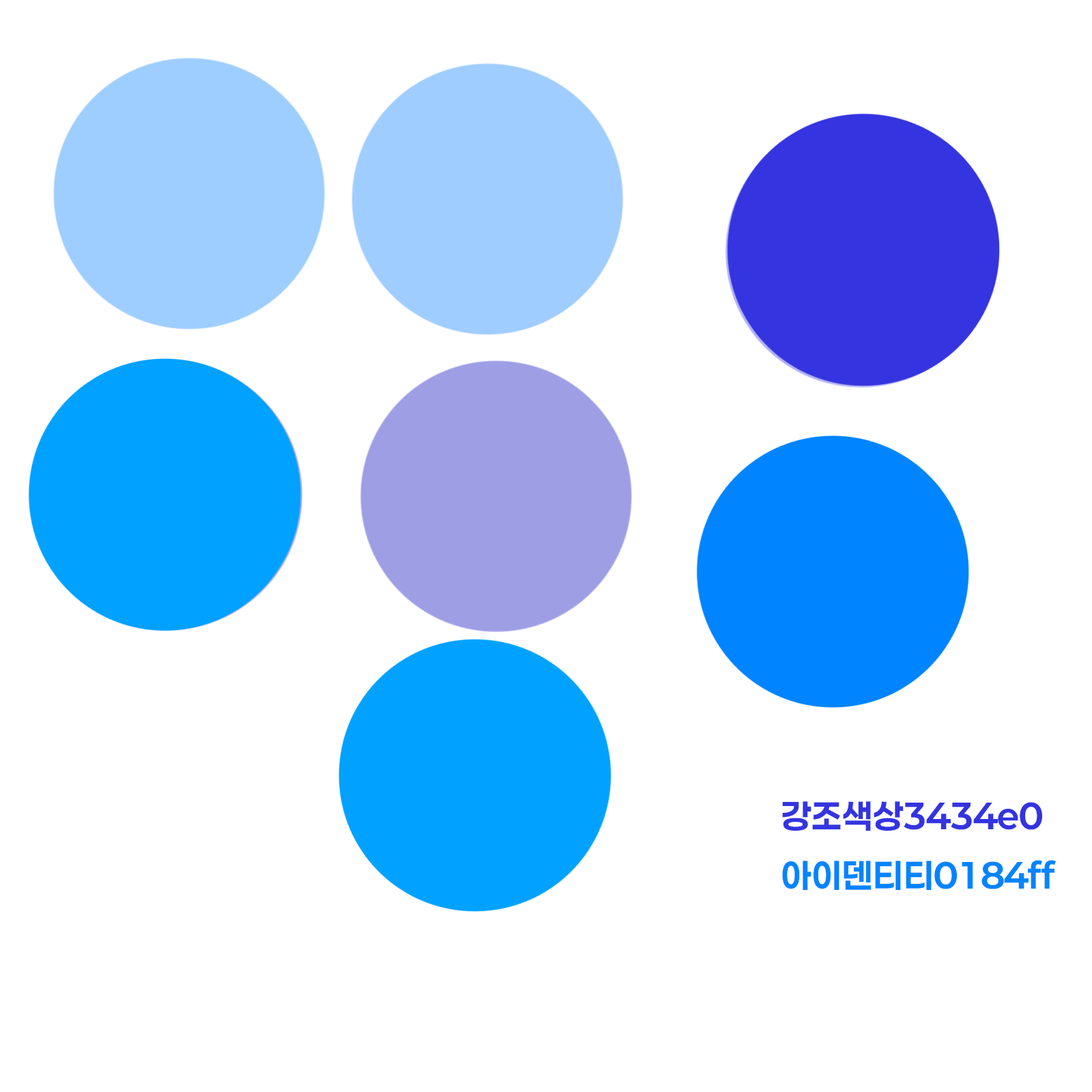
<style>
.page{position:relative;width:1092px;height:1092px;background:#ffffff}
.page>*{position:absolute;margin:0}
.t1{font:34.1px "Paperlogy-7Bold";letter-spacing:0.02em;color:#0184ff}
.t2{font:34.1px "Paperlogy-7Bold";letter-spacing:0.02em;color:#3434e0}
</style>
<div class="page">
<p class="t1" style="left:782px;top:801px;width:274px;height:89px"><span class="t2">강조색상3434e0<br></span>아이덴티티0184ff</p>
</div>
